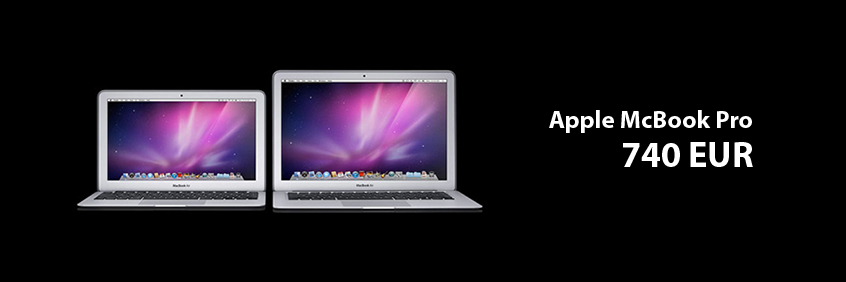
<style>
.page{position:relative;width:846px;height:282px;background:#000000}
.page>*{position:absolute;margin:0}
.t1{font:25px "MyriadPro-Bold";color:#ffffff}
.t2{font:36px "MyriadPro-Bold";color:#ffffff}
</style>
<div class="page">
<p class="t1" style="left:549px;top:110px;width:203px;height:23px">Apple McBook Pro</p>
<p class="t2" style="left:623px;top:142px;width:130px;height:25px">740 EUR</p>
</div>
